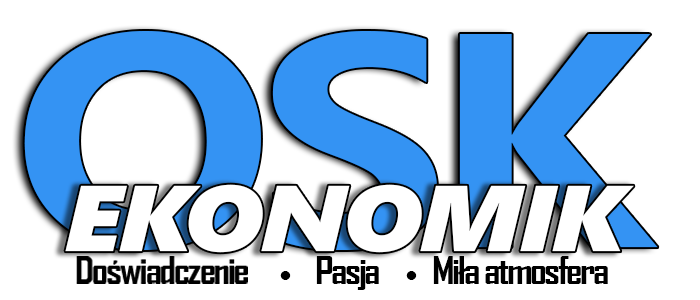
<style>
.page{position:relative;width:700px;height:300px;background:#ffffff}
.page>*{position:absolute;margin:0}
.t1{font:281.7px "MicrosoftYaHei-Bold";letter-spacing:-0.055em;color:#3493f3;scale:1.14 1}
.t2{font:92.6px "SegoeUIBlack-Italic";letter-spacing:-0.04em;color:#ffffff;scale:1.14 1}
.t3{font:36px "AgencyFB-Bold";letter-spacing:-0.055em;color:#000000;scale:1.13 1}
.t4{font:29.9px "MicrosoftYaHei-Bold";letter-spacing:-0.055em;color:#000000;scale:1.14 1}
</style>
<div class="page">
<p class="t1" style="left:24px;top:31px;width:634px;height:219px">OSK</p>
<p class="t2" style="left:65px;top:184px;width:569px;height:69px">EKONOMIK</p>
<p class="t3" style="left:316px;top:256px;width:63px;height:34px">Pasja</p>
<p class="t3" style="left:433px;top:256px;width:175px;height:28px">Miła atmosfera</p>
<p class="t4" style="left:280px;top:271px;width:11px;height:9px">·</p>
<p class="t4" style="left:406px;top:271px;width:11px;height:9px">·</p>
</div>
